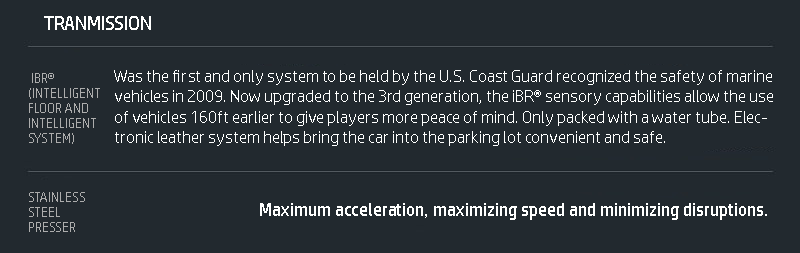
<style>
.page{position:relative;width:800px;height:253px;background:#22292f}
.page>*{position:absolute;margin:0}
.t1{font:19.1px "HPSimplified-Regular";color:#ffffff}
.t2{font:12.5px "HPSimplified-Regular";color:#adadad}
.t3{font:17px "HPSimplified-Regular";color:#ffffff}
.t4{font:18px "HPSimplified-Regular";color:#ffffff}
</style>
<div class="page">
<p class="t1" style="left:44px;top:16px;width:107px;height:14px">TRANMISSION</p>
<p class="t2" style="left:29px;top:73px;width:71px;height:71px">IBR® <br>(INTELLIGENT FLOOR AND INTELLIGENT SYSTEM)</p>
<p class="t3" style="left:114px;top:70px;width:659px;height:76px">Was the first and only system to be held by the U.S. Coast Guard recognized the safety of marine vehicles in 2009. Now upgraded to the 3rd generation, the iBR® sensory capabilities allow the use of vehicles 160ft earlier to give players more peace of mind. Only packed with a water tube. Electronic leather system helps bring the car into the parking lot convenient and safe.</p>
<p class="t2" style="left:29px;top:192px;width:56px;height:40px">STAINLESS STEEL PRESSER</p>
<p class="t4" style="left:260px;top:203px;width:507px;height:17px">Maximum acceleration, maximizing speed and minimizing disruptions.</p>
</div>
